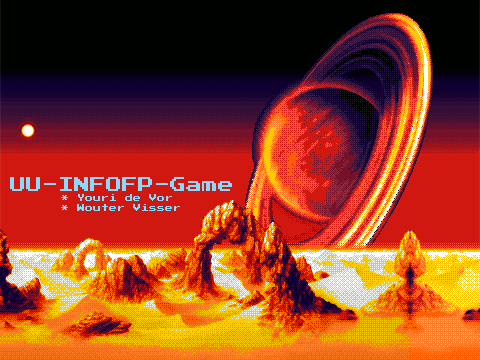
<style>
.page{position:relative;width:480px;height:360px;background:#d01810}
.page>*{position:absolute;margin:0}
.t1{font:16px "PressStart2P";color:#86dbff}
.t2{font:8px "PressStart2P";color:#86dbff}
</style>
<div class="page">
<p class="t1" style="left:10px;top:177px;width:222px;height:14px">UU-INFOFP-Game</p>
<p class="t2" style="left:61px;top:194px;width:119px;height:17px">* Youri de Vor<br>* Wouter Visser</p>
</div>
